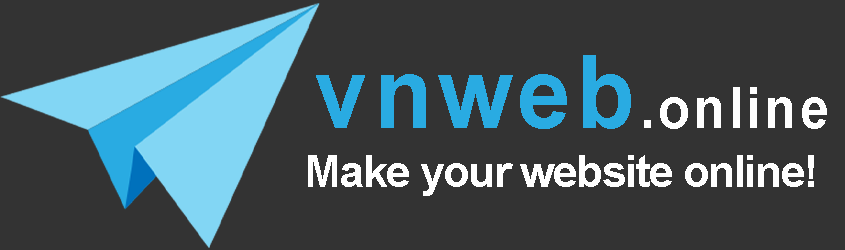
<style>
.page{position:relative;width:845px;height:250px;background:#333333}
.page>*{position:absolute;margin:0}
.t1{font:56.9px "Arial-BoldMT";letter-spacing:0.06em;color:#ffffff;scale:0.93 1}
.t2{font:102.4px "Arial-BoldMT";letter-spacing:0.06em;color:#29abe2;scale:0.93 1}
.t3{font:44.8px "Arial-BoldMT";letter-spacing:-0.04em;color:#ffffff}
</style>
<div class="page">
<p class="t1" style="left:316px;top:55px;width:511px;height:74px"><span class="t2">vnweb</span>.online</p>
<p class="t3" style="left:308px;top:155px;width:506px;height:41px">Make your website online!</p>
</div>
